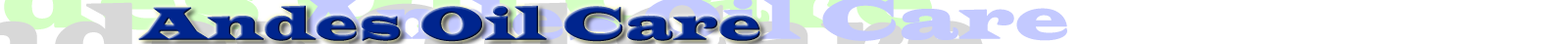
<style>
.page{position:relative;width:1568px;height:44px;background:#ffffff}
.page>*{position:absolute;margin:0}
.t1{font:47px "LatinWide";letter-spacing:0.025em;color:#00258e;font-weight:bold}
</style>
<div class="page">
<p class="t1" style="left:138px;top:5px;width:622px;height:37px">Andes Oil Care</p>
</div>
